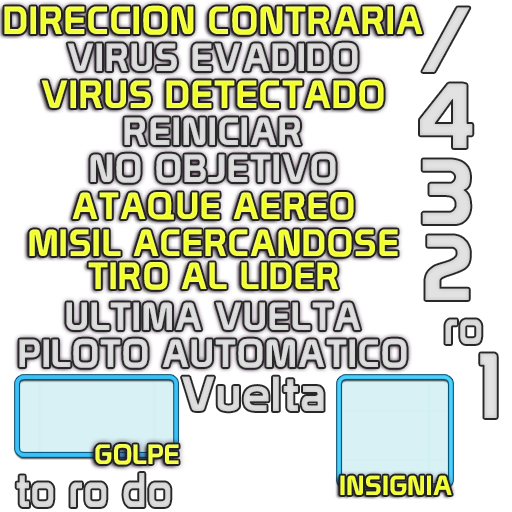
<style>
.page{position:relative;width:512px;height:512px;background:#ffffff}
.page>*{position:absolute;margin:0}
.t1{font:38.5px "Prototype";letter-spacing:0.03em}
.t2{font:38.5px "Prototype";letter-spacing:0.03em;color:#dbdbdb}
.t3{font:37px "Prototype";letter-spacing:0.03em}
.t4{font:47.3px "Prototype";letter-spacing:0.03em;color:#d8d8d8;scale:0.87 1}
.t5{font:90px "Prototype";letter-spacing:0.03em;color:#e0e0e0}
.t6{font:27.1px "Prototype";letter-spacing:0.03em;color:#f4ff4e}
.t7{font:27.1px "Prototype";letter-spacing:0.03em}
</style>
<div class="page">
<p class="t1" style="left:4px;top:5px;width:419px;height:30px">DIRECCION CONTRARIA</p>
<p class="t2" style="left:67px;top:42px;width:291px;height:30px">VIRUS EVADIDO</p>
<p class="t1" style="left:41px;top:79px;width:343px;height:30px">VIRUS DETECTADO</p>
<p class="t2" style="left:124px;top:117px;width:177px;height:28px">REINICIAR</p>
<p class="t2" style="left:90px;top:153px;width:246px;height:30px">NO OBJETIVO</p>
<p class="t3" style="left:72px;top:192px;width:282px;height:28px">ATAQUE AEREO</p>
<p class="t3" style="left:29px;top:229px;width:369px;height:28px">MISIL ACERCANDOSE</p>
<p class="t3" style="left:88px;top:262px;width:251px;height:28px">TIRO AL LIDER</p>
<p class="t2" style="left:66px;top:302px;width:295px;height:28px">ULTIMA VUELTA</p>
<p class="t4" style="left:445px;top:319px;width:37px;height:25px">ro</p>
<p class="t2" style="left:19px;top:338px;width:388px;height:30px">PILOTO AUTOMATICO</p>
<p class="t5" style="left:480px;top:353px;width:17px;height:65px">1</p>
<p class="t6" style="left:95px;top:444px;width:84px;height:21px">GOLPE</p>
<p class="t4" style="left:16px;top:475px;width:38px;height:32px">to</p>
<p class="t4" style="left:70px;top:482px;width:37px;height:25px">ro</p>
<p class="t7" style="left:340px;top:475px;width:112px;height:20px">INSIGNIA</p>
</div>
